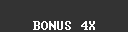
<style>
.page{position:relative;width:128px;height:32px;background:#333333}
.page>*{position:absolute;margin:0}
.t1{font:12px "Terminal";color:#ffffff}
</style>
<div class="page">
<p class="t1" style="left:33px;top:21px;width:62px;height:9px">BONUS 4X</p>
</div>
